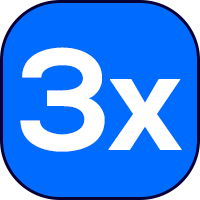
<style>
.page{position:relative;width:200px;height:200px;background:#006cff}
.page>*{position:absolute;margin:0}
.t1{font:144px "NexaBold";letter-spacing:-0.04em;color:#ffffff}
</style>
<div class="page">
<p class="t1" style="left:20px;top:47px;width:162px;height:105px">3x</p>
</div>
